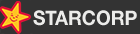
<style>
.page{position:relative;width:140px;height:34px;background:#333333}
.page>*{position:absolute;margin:0}
.t1{font:20px "HelveticaNeue-Bold";color:#ececea;scale:0.95 1}
</style>
<div class="page">
<p class="t1" style="left:33px;top:10px;width:104px;height:16px">STARCORP</p>
</div>
